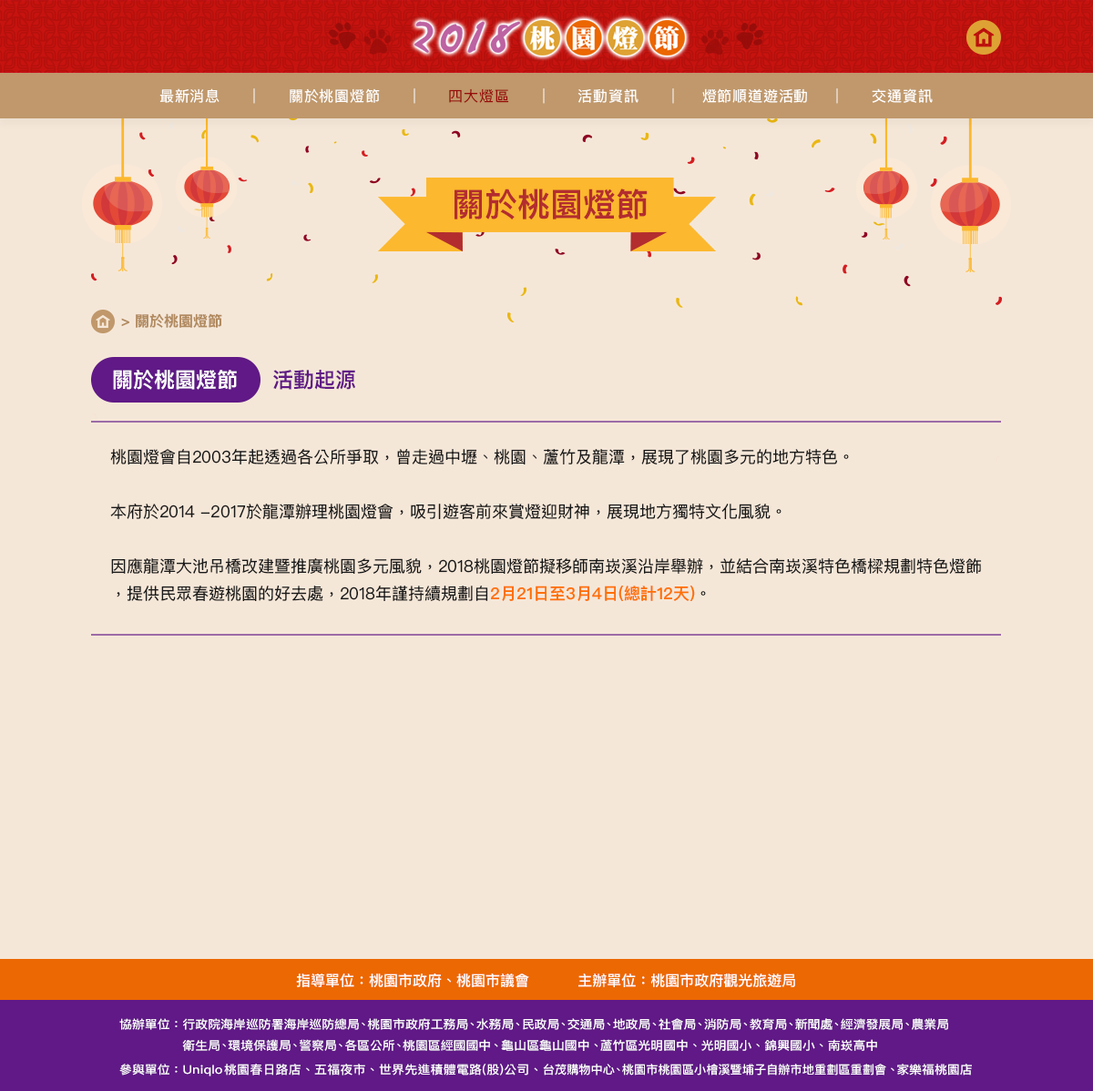
<style>
.page{position:relative;width:1093px;height:1091px;background:#f5e7d8}
.page>*{position:absolute;margin:0}
.t1{font:14.6px "PingFangTC-Regular";letter-spacing:0.05em;color:#ffffff}
.t2{font:14.6px "PingFangTC-Regular";letter-spacing:0.05em;color:#970c09}
.t3{font:32.8px "PingFangTC-Semibold";color:#b32d2f}
.t4{font:14.6px "PingFangTC-Semibold";color:#b18a5f}
.t5{font:20.9px "PingFangTC-Semibold";color:#ffffff}
.t6{font:20.9px "PingFangTC-Semibold";color:#601986}
.t7{font:16.4px/27.3px "PingFangTC-Regular";color:#181818}
.t8{font:16.4px/27.3px "PingFangTC-Semibold";color:#fe6f00}
.t9{font:14.6px "PingFangTC-Medium";color:#ffffff}
.t10{font:11.8px/21.3px "PingFangTC-Medium";color:#ffffff;scale:1.07 1}
.t11{font:11.8px/21.3px "PingFangTC-Medium";letter-spacing:-0.2em;color:#ffffff;scale:1.07 1}
.t12{font:11.8px/21.3px "PingFangTC-Medium";letter-spacing:-0.1em;color:#ffffff;scale:1.07 1}
.t13{font:11.8px/21.3px "PingFangTC-Medium";color:#ffffff;scale:1.12 1}
.t14{font:11.8px/21.3px "PingFangTC-Medium";letter-spacing:0.1em;color:#ffffff;scale:1.12 1}
.t15{font:11.8px/21.3px "PingFangTC-Medium";letter-spacing:0.02em;color:#ffffff;scale:1.07 1}
.t16{font:11.8px/21.3px "PingFangTC-Medium";color:#ffffff}
.t17{font:11.8px/21.3px "PingFangTC-Medium";letter-spacing:-0.2em;color:#ffffff}
</style>
<div class="page">
<p class="t1" style="left:159px;top:88px;width:774px;height:16px">最新消息     │     關於桃園燈節     │     <span class="t2">四大燈區</span>     │     活動資訊     │    燈節順道遊活動    │     交通資訊</p>
<p class="t3" style="left:454px;top:189px;width:194px;height:30px">關於桃園燈節</p>
<p class="t4" style="left:121px;top:313px;width:101px;height:15px">&gt; 關於桃園燈節</p>
<p class="t5" style="left:113px;top:370px;width:124px;height:20px">關於桃園燈節</p>
<p class="t6" style="left:273px;top:370px;width:82px;height:20px">活動起源</p>
<p class="t7" style="left:110px;top:449px;width:872px;height:152px">桃園燈會自2003年起透過各公所爭取，曾走過中壢、桃園、蘆竹及龍潭，展現了桃園多元的地方特色。<br><br>本府於2014 -2017於龍潭辦理桃園燈會，吸引遊客前來賞燈迎財神，展現地方獨特文化風貌。<br><br>因應龍潭大池吊橋改建暨推廣桃園多元風貌，2018桃園燈節擬移師南崁溪沿岸舉辦，並結合南崁溪特色橋樑規劃特色燈飾，提供民眾春遊桃園的好去處，2018年謹持續規劃自<span class="t8">2月21日至3月4日(總計12天)</span>。</p>
<p class="t9" style="left:296px;top:974px;width:499px;height:13px">指導單位：桃園市政府、桃園市議會          主辦單位：桃園市政府觀光旅遊局</p>
<p class="t10" style="left:119px;top:1018px;width:853px;height:59px">協辦單位：行政院海岸巡防署海岸巡防總<span class="t11">局、</span>桃園市政府工務<span class="t11">局、</span>水務<span class="t11">局、</span>民政<span class="t11">局、</span>交通<span class="t11">局、</span>地政<span class="t11">局、</span>社會<span class="t11">局、</span>消防<span class="t11">局、</span>教育<span class="t11">局、</span>新聞<span class="t11">處、</span>經濟發展<span class="t11">局、</span>農業<span class="t11">局<br></span>               衛生<span class="t11">局、</span>環境保護<span class="t11">局、</span>警察<span class="t11">局、</span>各區公<span class="t11">所、</span>桃園區經國國<span class="t12">中、</span>龜山區龜山國中<span class="t11">、</span>蘆竹區光明國中、光明國小、錦興國小、南崁高中<br>參與單位：<span class="t13">Uniql</span><span class="t14">o</span><span class="t15">桃園春日路店、五福夜市、世界先進積體電路(股)公司、</span><span class="t16">台茂購物中</span><span class="t17">心、</span><span class="t16">桃園市桃園區小檜溪暨埔子自辦市地重劃區重劃會</span><span class="t11">、</span>家樂福桃園店</p>
</div>
